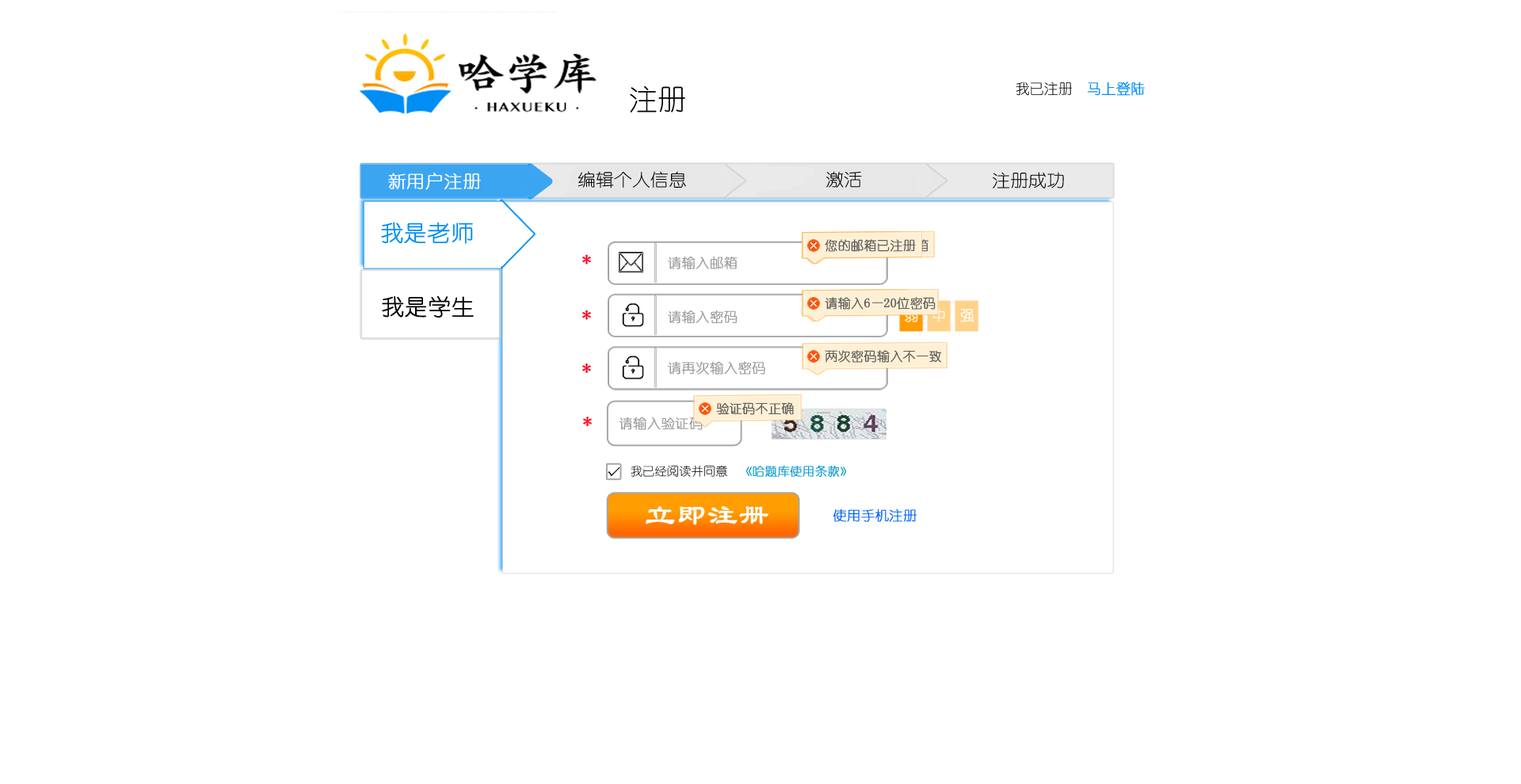
<style>
.page{position:relative;width:1521px;height:784px;background:#ffffff}
.page>*{position:absolute;margin:0}
.t1{font:28.5px "YouYuan";color:#000000}
.t2{font:14.3px "YouYuan";color:#000000}
.t3{font:14.3px "YouYuan";color:#008ef5;font-weight:bold}
.t4{font:17.2px "YouYuan";color:#fffdfd;font-weight:bold;scale:1.06 1}
.t5{font:17.2px "YouYuan";color:#000000;scale:1.06 1}
.t6{font:22.2px "YouYuan";color:#008ef5;font-weight:bold}
.t7{font:12.7px "YouYuan";color:#5e5e5e;font-weight:bold}
.t8{font:17.7px "YouYuan";color:#ff051d;font-weight:bold}
.t9{font:13.3px "YouYuan";color:#9b9b9b;font-weight:bold}
.t10{font:22.2px "YouYuan";color:#000000;font-weight:bold}
.t11{font:12.7px "YouYuan";font-weight:bold}
.t12{font:14.3px "YouYuan";color:#ffffff;font-weight:bold}
.t13{font:14.3px "YouYuan";font-weight:bold}
.t14{font:11.5px "YouYuan";color:#000000;font-weight:bold;scale:1.06 1}
.t15{font:11.8px "YouYuan";color:#119cd0;font-weight:bold}
.t16{font:11.8px "YouYuan";color:#000000}
.t17{font:29.6px "LiSu";color:#ffffff;font-weight:bold}
.t18{font:13.3px "YouYuan";color:#0a68f5;font-weight:bold}
</style>
<div class="page">
<p class="t1" style="left:630px;top:86px;width:55px;height:26px">注册</p>
<p class="t2" style="left:1015px;top:82px;width:130px;height:14px">我已注册  <span class="t3">马上登陆</span></p>
<p class="t4" style="left:388px;top:173px;width:93px;height:17px">新用户注册</p>
<p class="t5" style="left:577px;top:171px;width:109px;height:18px">编辑个人信息</p>
<p class="t5" style="left:826px;top:171px;width:36px;height:17px">激活</p>
<p class="t5" style="left:992px;top:172px;width:72px;height:17px">注册成功</p>
<p class="t6" style="left:381px;top:222px;width:92px;height:22px">我是老师</p>
<p class="t7" style="left:825px;top:239px;width:91px;height:13px">您的邮箱已注册</p>
<p class="t8" style="left:582px;top:254px;width:9px;height:11px">*</p>
<p class="t9" style="left:668px;top:256px;width:69px;height:13px">请输入邮箱</p>
<p class="t10" style="left:382px;top:295px;width:92px;height:23px">我是学生</p>
<p class="t11" style="left:825px;top:297px;width:64px;height:13px">请输入密码</p>
<p class="t7" style="left:825px;top:297px;width:110px;height:13px">请输入6—20位密码</p>
<p class="t8" style="left:582px;top:310px;width:9px;height:10px">*</p>
<p class="t9" style="left:668px;top:310px;width:69px;height:14px">请输入密码</p>
<p class="t12" style="left:905px;top:309px;width:13px;height:13px">弱</p>
<p class="t13" style="left:933px;top:308px;width:12px;height:14px">中</p>
<p class="t12" style="left:960px;top:309px;width:14px;height:13px">强</p>
<p class="t7" style="left:825px;top:350px;width:116px;height:13px">两次密码输入不一致</p>
<p class="t8" style="left:582px;top:364px;width:9px;height:9px">*</p>
<p class="t9" style="left:668px;top:361px;width:97px;height:14px">请再次输入密码</p>
<p class="t7" style="left:716px;top:402px;width:78px;height:13px">验证码不正确</p>
<p class="t8" style="left:583px;top:417px;width:9px;height:9px">*</p>
<p class="t9" style="left:619px;top:417px;width:84px;height:13px">请输入验证码</p>
<p class="t14" style="left:607px;top:467px;width:13px;height:9px">√</p>
<p class="t15" style="left:630px;top:465px;width:217px;height:13px"><span class="t16">我已经阅读并同意  </span>《哈题库使用条款》</p>
<p class="t17" style="left:646px;top:506px;width:123px;height:19px">立即注册</p>
<p class="t18" style="left:832px;top:509px;width:84px;height:13px">使用手机注册</p>
</div>
